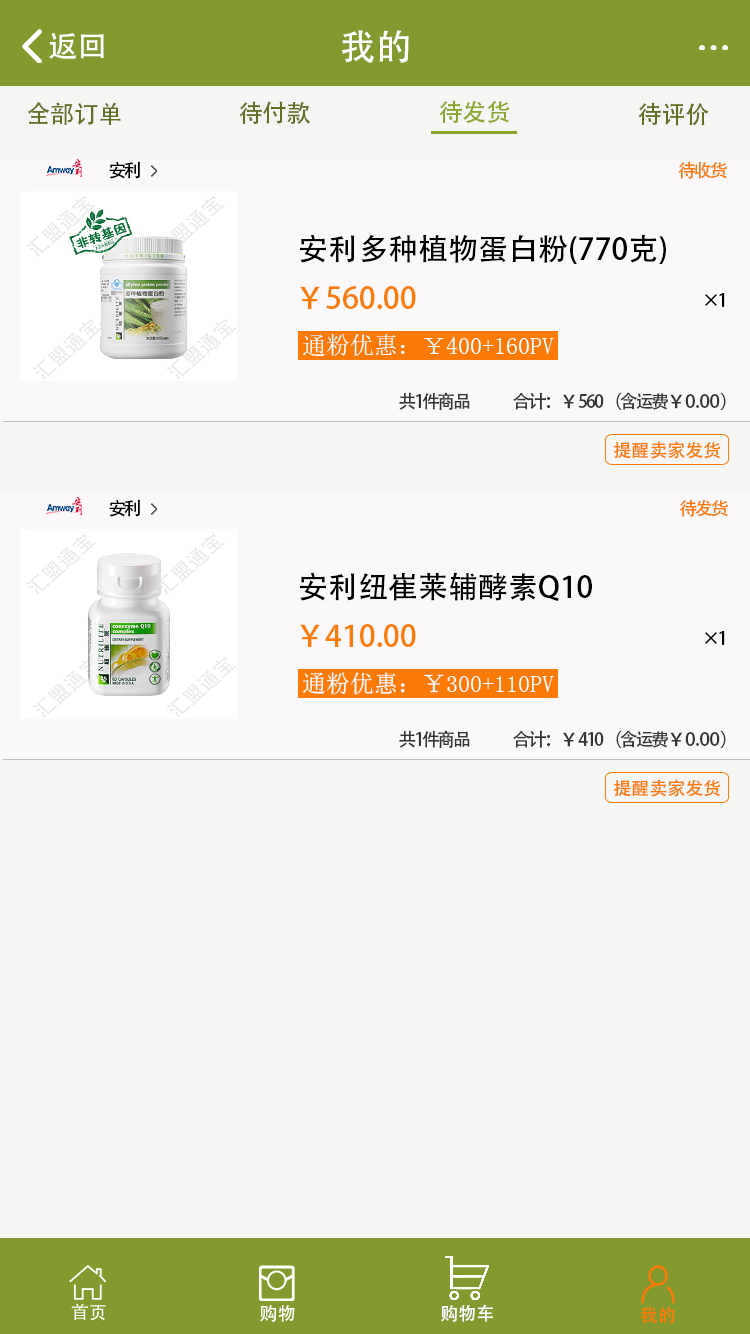
<style>
.page{position:relative;width:750px;height:1334px;background:#f5f5f3}
.page>*{position:absolute;margin:0}
.t1{font:36px "AdobeHeitiStd-Regular";color:#ffffff}
.t2{font:30px "AdobeHeitiStd-Regular";color:#ffffff}
.t3{font:24px "AdobeHeitiStd-Regular";color:#607222}
.t4{font:24px "AdobeHeitiStd-Regular";color:#8aa62a}
.t5{font:18px "AdobeHeitiStd-Regular";letter-spacing:-0.12em;color:#000000}
.t6{font:18px "AdobeHeitiStd-Regular";letter-spacing:-0.12em;color:#fc7b08}
.t7{font:30px "AdobeHeitiStd-Regular";color:#000000}
.t8{font:30px "AdobeHeitiStd-Regular";color:#fc7b08}
.t9{font:24px "AdobeHeitiStd-Regular";color:#ffffff}
.t10{font:18px "AdobeHeitiStd-Regular";letter-spacing:-0.12em;color:#353534}
.t11{font:18px "AdobeHeitiStd-Regular";color:#353534}
.t12{font:18px "AdobeHeitiStd-Regular";color:#fc7b08}
.t13{font:18px "AdobeHeitiStd-Regular";color:#ffffff}
</style>
<div class="page">
<p class="t1" style="left:341px;top:30px;width:68px;height:33px">我的</p>
<p class="t2" style="left:49px;top:33px;width:55px;height:26px">返回</p>
<p class="t3" style="left:27px;top:102px;width:94px;height:23px">全部订单</p>
<p class="t3" style="left:239px;top:101px;width:71px;height:23px">待付款</p>
<p class="t4" style="left:439px;top:100px;width:71px;height:23px">待发货</p>
<p class="t3" style="left:638px;top:102px;width:71px;height:24px">待评价</p>
<p class="t5" style="left:109px;top:161px;width:32px;height:18px">安利</p>
<p class="t6" style="left:678px;top:161px;width:50px;height:18px">待收货</p>
<p class="t7" style="left:299px;top:234px;width:367px;height:30px">安利多种植物蛋白粉(770克)</p>
<p class="t8" style="left:300px;top:286px;width:116px;height:23px">￥560.00</p>
<p class="t5" style="left:705px;top:293px;width:20px;height:14px">×1</p>
<p class="t9" style="left:303px;top:334px;width:251px;height:22px">通粉优惠：￥400+160PV</p>
<p class="t10" style="left:399px;top:392px;width:327px;height:18px">共1件商品                       合计：<span class="t11">￥</span>560 （含运费<span class="t11">￥0.00）</span></p>
<p class="t12" style="left:614px;top:441px;width:107px;height:18px">提醒卖家发货</p>
<p class="t5" style="left:109px;top:499px;width:32px;height:18px">安利</p>
<p class="t6" style="left:679px;top:499px;width:50px;height:18px">待发货</p>
<p class="t7" style="left:299px;top:572px;width:293px;height:29px">安利纽崔莱辅酵素Q10</p>
<p class="t8" style="left:300px;top:624px;width:116px;height:23px">￥410.00</p>
<p class="t5" style="left:705px;top:631px;width:20px;height:14px">×1</p>
<p class="t9" style="left:303px;top:672px;width:251px;height:23px">通粉优惠：￥300+110PV</p>
<p class="t10" style="left:399px;top:730px;width:327px;height:18px">共1件商品                       合计：<span class="t11">￥</span>410 （含运费<span class="t11">￥0.00）</span></p>
<p class="t12" style="left:614px;top:779px;width:107px;height:18px">提醒卖家发货</p>
<p class="t13" style="left:441px;top:1304px;width:52px;height:18px">购物车</p>
<p class="t12" style="left:640px;top:1306px;width:35px;height:18px">我的</p>
</div>
